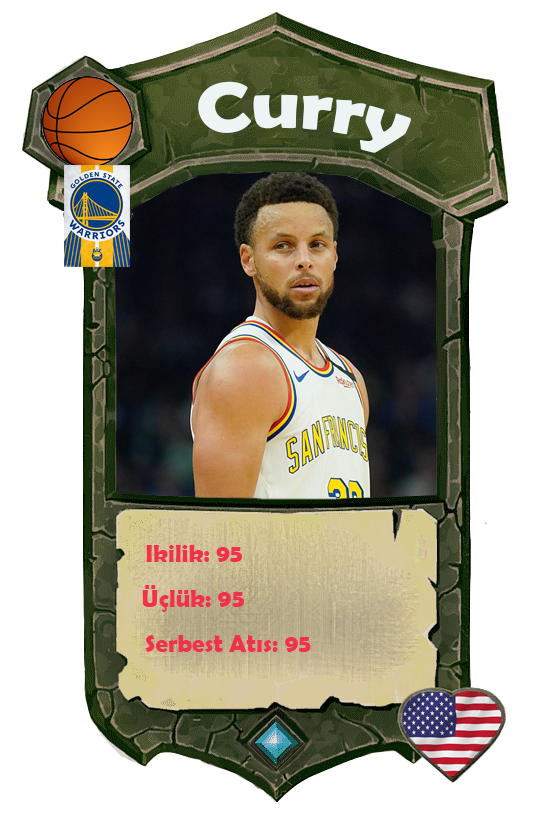
<style>
.page{position:relative;width:558px;height:814px;background:#ffffff}
.page>*{position:absolute;margin:0}
.t1{font:70.9px "BerlinSansFBDemi-Bold";color:#ecf4f4;scale:1.06 1}
.t2{font:25px "BerlinSansFBDemi-Bold";color:#f2314d}
</style>
<div class="page">
<p class="t1" style="left:198px;top:81px;width:213px;height:72px;rotate:4deg">Curry</p>
<p class="t2" style="left:146px;top:545px;width:96px;height:17px">Ikilik: 95</p>
<p class="t2" style="left:142px;top:585px;width:102px;height:27px">Üçlük: 95</p>
<p class="t2" style="left:145px;top:635px;width:166px;height:17px">Serbest Atıs: 95</p>
</div>
